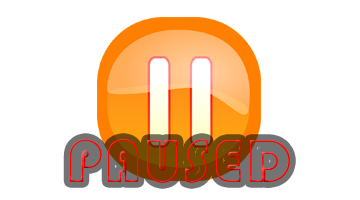
<style>
.page{position:relative;width:360px;height:200px;background:#ffffff}
.page>*{position:absolute;margin:0}
.t1{font:60px "CircleHollow";letter-spacing:0.05em}
</style>
<div class="page">
<p class="t1" style="left:69px;top:139px;width:221px;height:44px">PAUSED</p>
</div>
